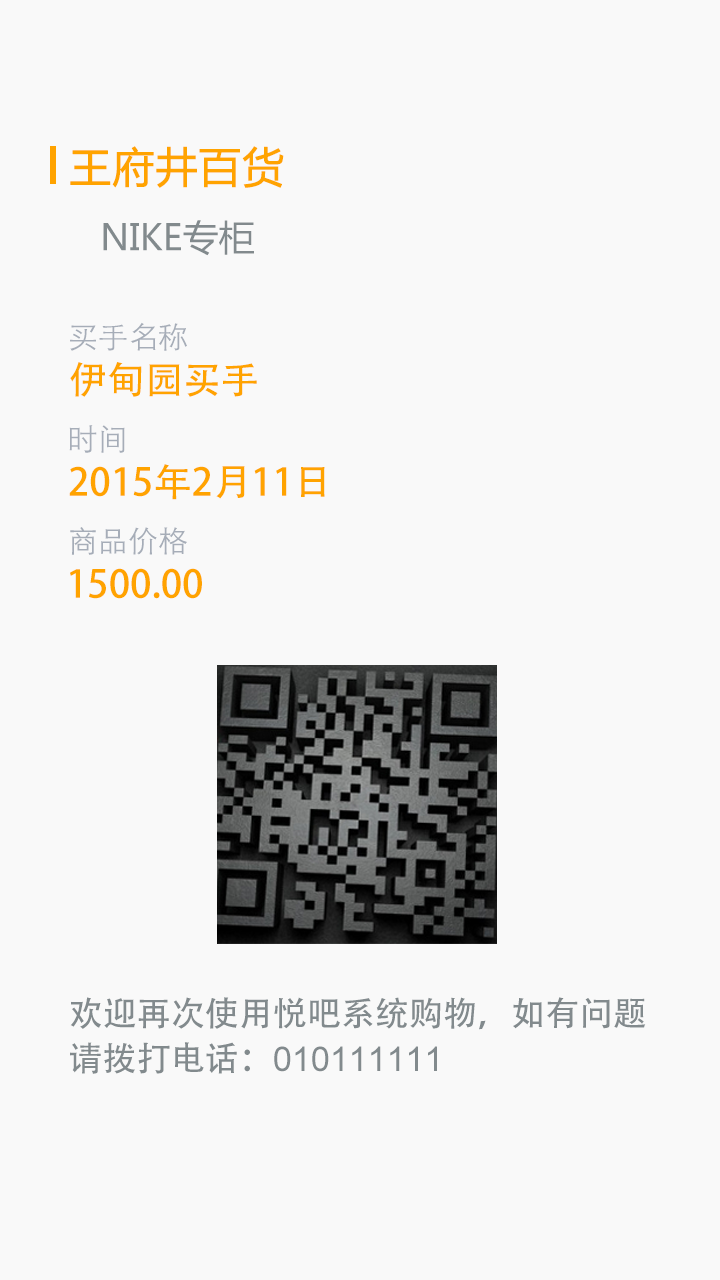
<style>
.page{position:relative;width:720px;height:1280px;background:#f9f9f9}
.page>*{position:absolute;margin:0}
.t1{font:36px "MicrosoftYaHei";color:#828a8d}
.t2{font:42px "MicrosoftYaHei";color:#ffa300;font-weight:bold}
.t3{font:30px "STHeitiSC-Light";color:#a6adb8}
.t4{font:38px "AdobeHeitiStd-Regular";color:#ffa300}
.t5{font:34.1px/45.1px "AdobeHeitiStd-Regular";color:#828a8d}
.t6{font:34.1px/45.1px "ArialMT";color:#828a8d}
</style>
<div class="page">
<p class="t1" style="left:70px;top:146px;width:214px;height:110px;text-align:center"><span class="t2">王府井百货<br></span>NIKE专柜</p>
<p class="t3" style="left:70px;top:322px;width:117px;height:29px">买手名称</p>
<p class="t4" style="left:70px;top:362px;width:187px;height:35px">伊甸园买手</p>
<p class="t3" style="left:69px;top:425px;width:56px;height:28px">时间</p>
<p class="t4" style="left:69px;top:464px;width:256px;height:36px">2015年2月11日</p>
<p class="t3" style="left:70px;top:527px;width:117px;height:28px">商品价格</p>
<p class="t4" style="left:70px;top:568px;width:132px;height:31px">1500.00</p>
<p class="t5" style="left:70px;top:997px;width:576px;height:77px">欢迎再次使用悦吧系统购物，如有问题<br>请拨打电话：<span class="t6">010111111</span></p>
</div>
